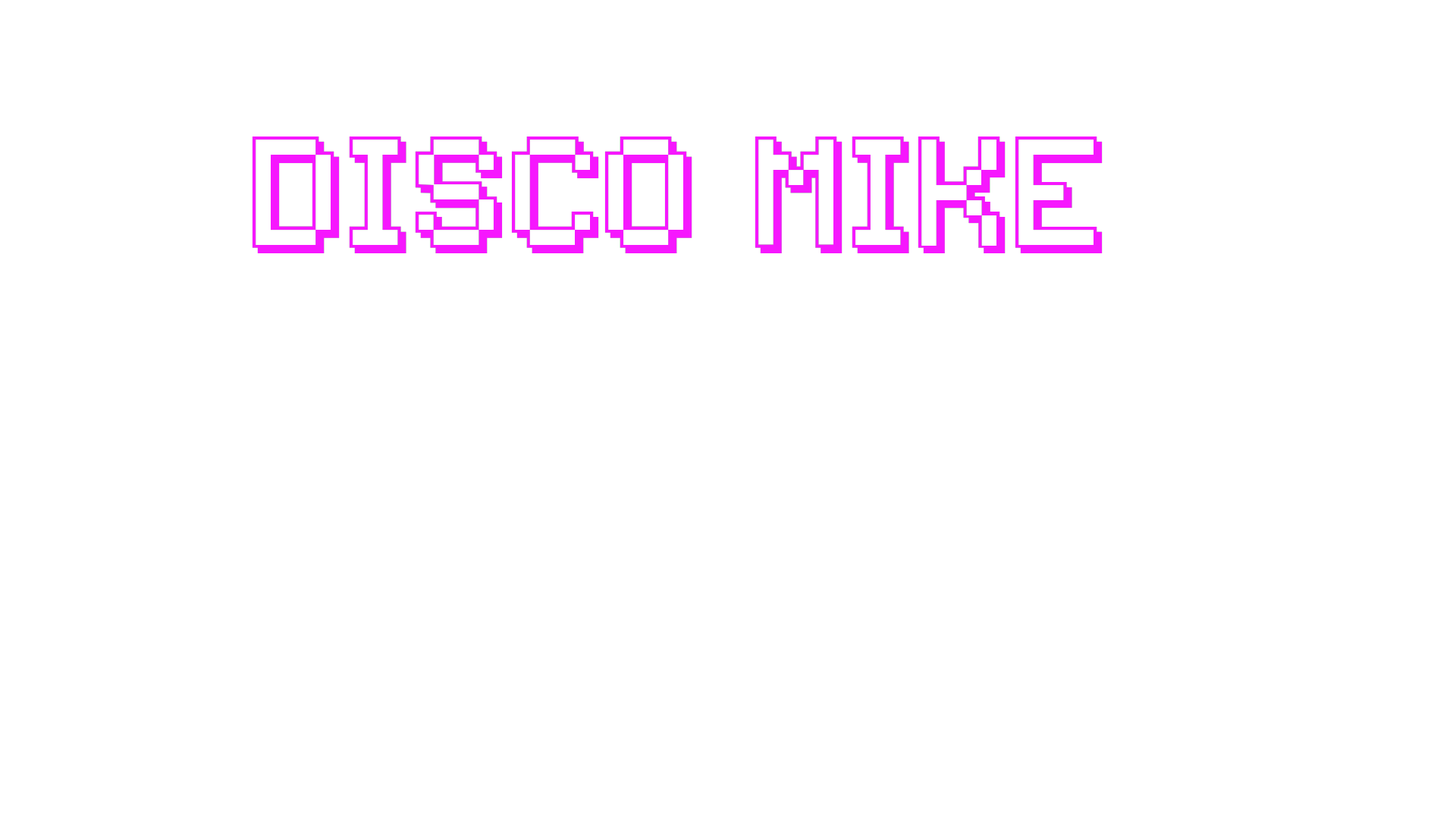
<style>
.page{position:relative;width:1456px;height:819px;background:#ffffff}
.page>*{position:absolute;margin:0}
.t1{font:105.3px "Backto1982";color:#f617fe}
</style>
<div class="page">
<p class="t1" style="left:252px;top:136px;width:851px;height:117px">disco mike</p>
<p class="t1" style="left:252px;top:136px;width:851px;height:117px">disco mike</p>
</div>
